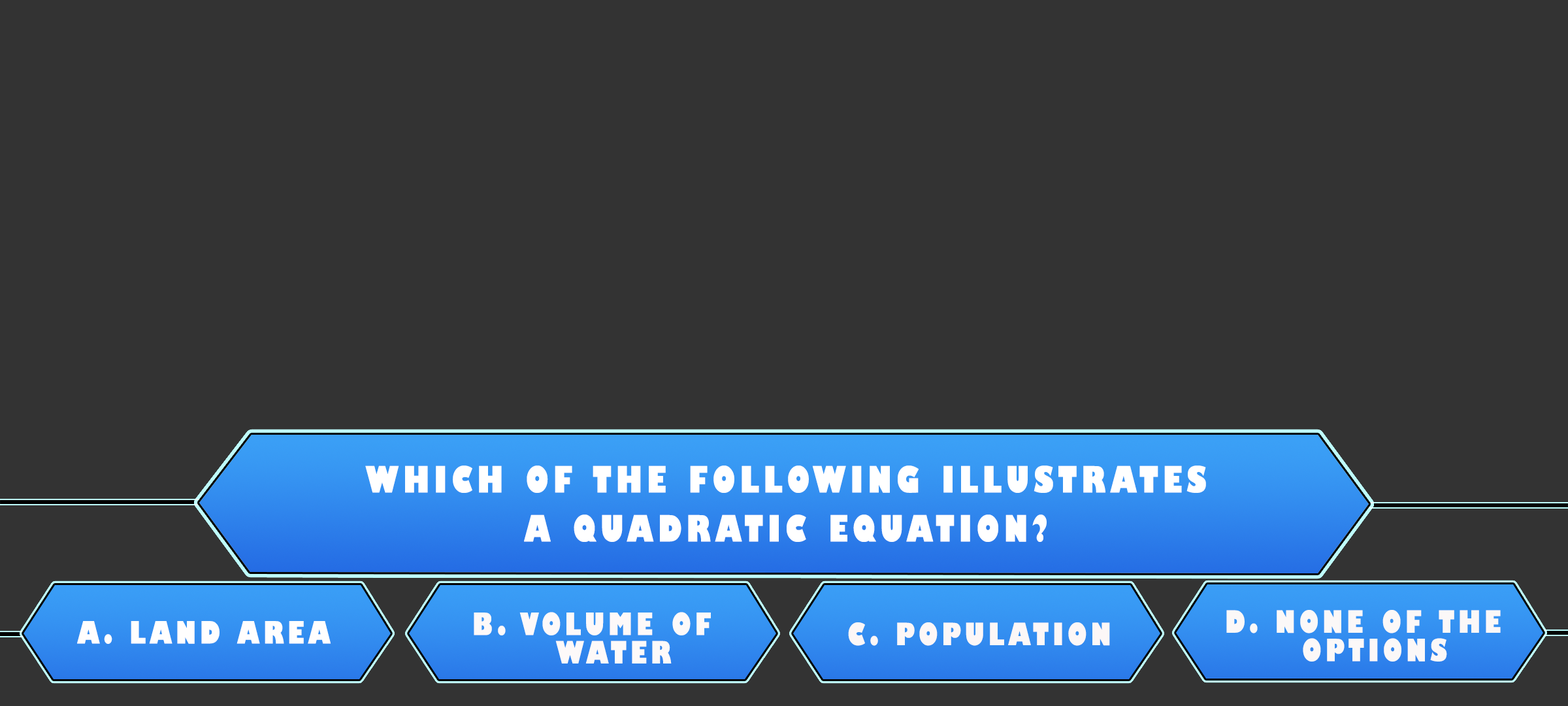
<style>
.page{position:relative;width:1568px;height:706px;background:#333333}
.page>*{position:absolute;margin:0}
.t1{font:35.4px/49px "GillSans-UltraBoldCondensed";letter-spacing:0.115em;color:#ffffff;text-transform:uppercase;scale:1.12 1}
.t2{font:29.9px/28.4px "GillSans-UltraBoldCondensed";letter-spacing:0.115em;color:#fdf9f9;text-transform:uppercase;scale:1.12 1}
.t3{font:29.9px/28.4px "GillSans-UltraBoldCondensed";letter-spacing:0.115em;color:#fbf8f8;text-transform:uppercase;scale:1.12 1}
.t4{font:29.9px "GillSans-UltraBoldCondensed";letter-spacing:0.115em;color:#fffefe;text-transform:uppercase;scale:1.12 1}
.t5{font:29.9px "GillSans-UltraBoldCondensed";letter-spacing:0.115em;color:#fcf7f7;text-transform:uppercase;scale:1.12 1}
</style>
<div class="page">
<p class="t1" style="left:365px;top:465px;width:841px;height:77px;text-align:center">Which of the following illustrates<br>a quadratic equation?</p>
<p class="t2" style="left:474px;top:612px;width:237px;height:51px">b. volume of<br>    water</p>
<p class="t3" style="left:1226px;top:610px;width:275px;height:51px">d. none of the<br>    options</p>
<p class="t4" style="left:77px;top:621px;width:254px;height:23px">a. land area</p>
<p class="t5" style="left:848px;top:622px;width:262px;height:23px">c. population</p>
</div>
